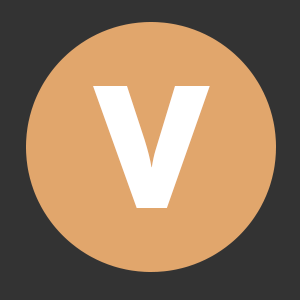
<style>
.page{position:relative;width:300px;height:300px;background:#e1a66c}
.page>*{position:absolute;margin:0}
.t1{font:187.3px "TwCenMT-CondensedExtraBold";color:#ffffff;scale:1.17 1}
</style>
<div class="page">
<p class="t1" style="left:93px;top:86px;width:117px;height:122px">V</p>
</div>
